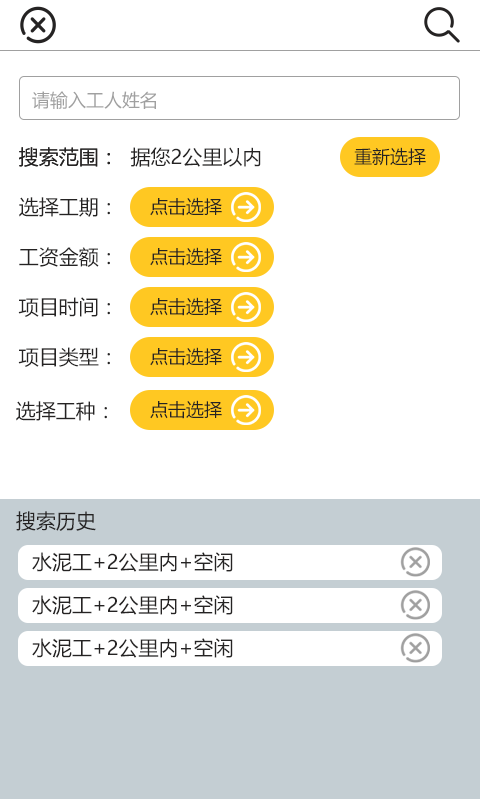
<style>
.page{position:relative;width:480px;height:800px;background:#ffffff}
.page>*{position:absolute;margin:0}
.t1{font:18px "MicrosoftYaHei";color:#a0a0a0}
.t2{font:20px "MicrosoftYaHei";color:#252323}
.t3{font:18px "MicrosoftYaHei";color:#252323}
</style>
<div class="page">
<p class="t1" style="left:32px;top:91px;width:124px;height:18px">请输入工人姓名</p>
<p class="t2" style="left:19px;top:147px;width:91px;height:20px">搜索范围：</p>
<p class="t2" style="left:19px;top:147px;width:242px;height:20px">搜索范围：  据您2公里以内</p>
<p class="t3" style="left:354px;top:147px;width:72px;height:19px">重新选择</p>
<p class="t2" style="left:19px;top:197px;width:91px;height:20px">选择工期：</p>
<p class="t3" style="left:150px;top:197px;width:72px;height:19px">点击选择</p>
<p class="t2" style="left:19px;top:247px;width:91px;height:20px">工资金额：</p>
<p class="t3" style="left:150px;top:247px;width:72px;height:19px">点击选择</p>
<p class="t2" style="left:18px;top:297px;width:92px;height:20px">项目时间：</p>
<p class="t3" style="left:150px;top:297px;width:72px;height:19px">点击选择</p>
<p class="t2" style="left:18px;top:347px;width:92px;height:20px">项目类型：</p>
<p class="t3" style="left:150px;top:347px;width:72px;height:19px">点击选择</p>
<p class="t2" style="left:16px;top:401px;width:91px;height:20px">选择工种：</p>
<p class="t3" style="left:150px;top:400px;width:72px;height:19px">点击选择</p>
<p class="t2" style="left:16px;top:511px;width:80px;height:20px">搜索历史</p>
<p class="t2" style="left:32px;top:552px;width:201px;height:20px">水泥工+2公里内+空闲</p>
<p class="t2" style="left:32px;top:595px;width:201px;height:20px">水泥工+2公里内+空闲</p>
<p class="t2" style="left:32px;top:638px;width:201px;height:20px">水泥工+2公里内+空闲</p>
</div>
